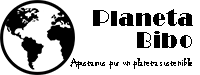
<style>
.page{position:relative;width:200px;height:75px;background:#ffffff}
.page>*{position:absolute;margin:0}
.t1{font:23.4px "Broadway";color:#000000}
.t2{font:11.7px "Chiller-Regular";color:#000000}
</style>
<div class="page">
<p class="t1" style="left:93px;top:9px;width:100px;height:17px">Planeta</p>
<p class="t1" style="left:137px;top:31px;width:55px;height:17px">Bibo</p>
<p class="t2" style="left:70px;top:58px;width:122px;height:11px">Apostamos por un planeta sostenible</p>
</div>
